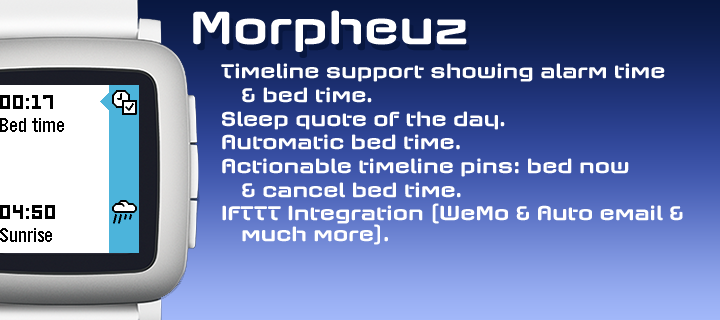
<style>
.page{position:relative;width:720px;height:320px}
.page>*{position:absolute;margin:0}
.t1{font:47.8px "AxaxaxRg-Bold";color:#ffffff}
.t2{font:20.8px "AxaxaxRg-Bold";color:#ffffff}
</style>
<div class="page">
<p class="t1" style="left:193px;top:10px;width:274px;height:42px">Morpheuz</p>
<p class="t2" style="left:221px;top:63px;width:444px;height:19px">Timeline support showing alarm time</p>
<p class="t2" style="left:242px;top:87px;width:130px;height:16px">&amp; bed time.</p>
<p class="t2" style="left:222px;top:111px;width:283px;height:19px">Sleep quote of the day.</p>
<p class="t2" style="left:222px;top:134px;width:238px;height:16px">Automatic bed time.</p>
<p class="t2" style="left:222px;top:158px;width:407px;height:19px">Actionable timeline pins: bed now</p>
<p class="t2" style="left:242px;top:182px;width:219px;height:16px">&amp; cancel bed time.</p>
<p class="t2" style="left:222px;top:203px;width:461px;height:21px">IFTTT Integration (WeMo &amp; Auto email &amp;</p>
<p class="t2" style="left:242px;top:224px;width:146px;height:21px">much more).</p>
</div>
